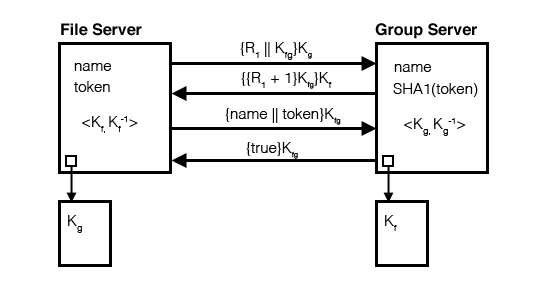
<style>
.page{position:relative;width:541px;height:287px;background:#ffffff}
.page>*{position:absolute;margin:0}
.t1{font:16px "Helvetica-Bold";color:#000000}
.t2{font:15px "Helvetica-Light";color:#000000}
.t3{font:12px "Helvetica-Light";color:#000000}
</style>
<div class="page">
<p class="t1" style="left:61px;top:23px;width:81px;height:13px">File Server</p>
<p class="t1" style="left:375px;top:23px;width:102px;height:16px">Group Server</p>
<p class="t2" style="left:240px;top:42px;width:72px;height:18px">{R1 || Kfg}K<span class="t3">g</span></p>
<p class="t2" style="left:74px;top:63px;width:38px;height:8px">name</p>
<p class="t2" style="left:394px;top:64px;width:38px;height:8px">name</p>
<p class="t2" style="left:241px;top:72px;width:91px;height:17px">{{R1 + 1}K<span class="t3">fg</span>}Kf</p>
<p class="t2" style="left:74px;top:81px;width:36px;height:11px">token</p>
<p class="t2" style="left:393px;top:83px;width:85px;height:14px">SHA1(token)</p>
<p class="t2" style="left:225px;top:108px;width:116px;height:17px">{name || token}K<span class="t3">fg</span></p>
<p class="t2" style="left:82px;top:116px;width:56px;height:17px">&lt;Kf, Kf-1&gt;</p>
<p class="t2" style="left:404px;top:118px;width:62px;height:18px">&lt;Kg, Kg-1&gt;</p>
<p class="t2" style="left:246px;top:142px;width:52px;height:17px">{true}K<span class="t3">fg</span></p>
<p class="t2" style="left:68px;top:215px;width:14px;height:18px">Kg</p>
<p class="t2" style="left:385px;top:215px;width:12px;height:16px">Kf</p>
</div>
